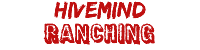
<style>
.page{position:relative;width:200px;height:50px;background:#ffffff}
.page>*{position:absolute;margin:0}
.t1{font:24px "Edo";color:#bf1010}
.t2{font:24px "District";color:#bf1010}
</style>
<div class="page">
<p class="t1" style="left:54px;top:1px;width:92px;height:19px">HiveMind</p>
<p class="t2" style="left:43px;top:23px;width:112px;height:23px">Ranching</p>
</div>
